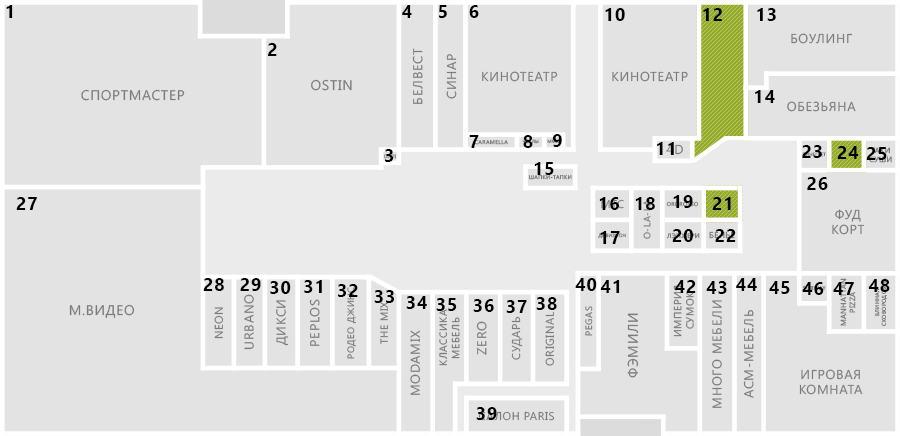
<style>
.page{position:relative;width:900px;height:436px;background:#e3e3e3}
.page>*{position:absolute;margin:0}
.t1{font:18px "SegoeUI-Bold";letter-spacing:0.05em;color:#000000;text-transform:uppercase}
.t2{font:13.1px "SegoeUI";letter-spacing:0.05em;color:#7c7c7c;text-transform:uppercase}
.t3{font:14px "SegoeUI";letter-spacing:0.05em;color:#7c7c7c;text-transform:uppercase}
.t4{font:5.6px "SegoeUI";letter-spacing:0.05em;color:#7c7c7c;text-transform:uppercase}
.t5{font:13.1px "SegoeUI";letter-spacing:0.05em;text-transform:uppercase}
.t6{font:9.4px "SegoeUI";letter-spacing:0.05em;text-transform:uppercase}
.t7{font:6.6px "SegoeUI";letter-spacing:0.05em;color:#7c7c7c;text-transform:uppercase}
.t8{font:8.4px "SegoeUI";letter-spacing:0.05em;text-transform:uppercase}
.t9{font:7.5px "SegoeUI";letter-spacing:0.05em;color:#7c7c7c;text-transform:uppercase}
.t10{font:10.3px "SegoeUI";letter-spacing:0.05em;color:#7c7c7c;text-transform:uppercase}
.t11{font:11.2px "SegoeUI";letter-spacing:0.05em;color:#7c7c7c;text-transform:uppercase}
</style>
<div class="page">
<p class="t1" style="left:6px;top:5px;width:7px;height:13px">1</p>
<p class="t1" style="left:402px;top:5px;width:10px;height:13px">4</p>
<p class="t1" style="left:439px;top:5px;width:8px;height:13px">5</p>
<p class="t1" style="left:469px;top:5px;width:10px;height:13px">6</p>
<p class="t1" style="left:605px;top:8px;width:20px;height:13px">10</p>
<p class="t1" style="left:703px;top:8px;width:19px;height:13px">12</p>
<p class="t1" style="left:757px;top:8px;width:19px;height:13px">13</p>
<p class="t2" style="left:791px;top:33px;width:62px;height:11px">Боулинг</p>
<p class="t1" style="left:268px;top:43px;width:9px;height:13px">2</p>
<p class="t2" style="left:412px;top:48px;width:11px;height:56px;rotate:-90deg">Белвест</p>
<p class="t2" style="left:446px;top:54px;width:11px;height:45px;rotate:-90deg">синар</p>
<p class="t2" style="left:482px;top:71px;width:76px;height:11px">Кинотеатр</p>
<p class="t2" style="left:612px;top:71px;width:76px;height:11px">Кинотеатр</p>
<p class="t3" style="left:81px;top:89px;width:104px;height:12px">Спортмастер</p>
<p class="t3" style="left:311px;top:79px;width:41px;height:12px">Ostin</p>
<p class="t1" style="left:755px;top:90px;width:20px;height:13px">14</p>
<p class="t2" style="left:787px;top:101px;width:69px;height:11px">Обезьяна</p>
<p class="t1" style="left:469px;top:135px;width:10px;height:13px">7</p>
<p class="t1" style="left:523px;top:135px;width:10px;height:13px">8</p>
<p class="t1" style="left:552px;top:134px;width:10px;height:13px">9</p>
<p class="t1" style="left:385px;top:149px;width:8px;height:13px">3</p>
<p class="t4" style="left:474px;top:139px;width:34px;height:6px">Caramella</p>
<p class="t1" style="left:657px;top:142px;width:17px;height:13px">11</p>
<p class="t5" style="left:666px;top:144px;width:17px;height:11px">4d</p>
<p class="t1" style="left:802px;top:145px;width:20px;height:13px">23</p>
<p class="t1" style="left:837px;top:146px;width:22px;height:13px">24</p>
<p class="t1" style="left:866px;top:147px;width:21px;height:13px">25</p>
<p class="t1" style="left:534px;top:162px;width:20px;height:13px">15</p>
<p class="t4" style="left:529px;top:175px;width:43px;height:5px">Шапки-тапки</p>
<p class="t1" style="left:807px;top:177px;width:21px;height:13px">26</p>
<p class="t1" style="left:16px;top:197px;width:21px;height:13px">27</p>
<p class="t1" style="left:599px;top:197px;width:20px;height:13px">16</p>
<p class="t1" style="left:635px;top:197px;width:20px;height:13px">18</p>
<p class="t1" style="left:673px;top:195px;width:20px;height:13px">19</p>
<p class="t1" style="left:712px;top:197px;width:19px;height:13px">21</p>
<p class="t6" style="left:643px;top:200px;width:8px;height:39px;rotate:-90deg">O-la-la</p>
<p class="t2" style="left:832px;top:209px;width:33px;height:26px;text-align:center">Фуд<br>корт</p>
<p class="t1" style="left:600px;top:231px;width:20px;height:13px">17</p>
<p class="t7" style="left:666px;top:233px;width:34px;height:6px">Лэнжери</p>
<p class="t1" style="left:672px;top:229px;width:21px;height:13px">20</p>
<p class="t8" style="left:709px;top:231px;width:26px;height:8px">Белье</p>
<p class="t1" style="left:715px;top:229px;width:21px;height:13px">22</p>
<p class="t1" style="left:203px;top:278px;width:21px;height:13px">28</p>
<p class="t1" style="left:240px;top:278px;width:21px;height:13px">29</p>
<p class="t1" style="left:270px;top:281px;width:21px;height:13px">30</p>
<p class="t1" style="left:304px;top:280px;width:18px;height:13px">31</p>
<p class="t1" style="left:575px;top:278px;width:22px;height:13px">40</p>
<p class="t1" style="left:600px;top:280px;width:20px;height:13px">41</p>
<p class="t1" style="left:675px;top:280px;width:21px;height:13px">42</p>
<p class="t1" style="left:706px;top:281px;width:21px;height:13px">43</p>
<p class="t1" style="left:736px;top:278px;width:21px;height:13px">44</p>
<p class="t1" style="left:769px;top:281px;width:21px;height:13px">45</p>
<p class="t9" style="left:840px;top:278px;width:16px;height:48px;text-align:center;rotate:-90deg">Manhattan<br>pizza</p>
<p class="t1" style="left:868px;top:279px;width:22px;height:13px">48</p>
<p class="t4" style="left:875px;top:278px;width:12px;height:48px;text-align:center;rotate:-90deg">Блинная<br>сковородовна</p>
<p class="t2" style="left:244px;top:294px;width:10px;height:56px;rotate:-90deg">Urbano</p>
<p class="t1" style="left:338px;top:284px;width:20px;height:13px">32</p>
<p class="t6" style="left:347px;top:287px;width:9px;height:72px;rotate:-90deg">Родео джинс</p>
<p class="t1" style="left:374px;top:290px;width:20px;height:13px">33</p>
<p class="t10" style="left:673px;top:285px;width:21px;height:52px;text-align:center;rotate:-90deg">Империя<br>сумок</p>
<p class="t1" style="left:802px;top:282px;width:22px;height:13px">46</p>
<p class="t1" style="left:833px;top:282px;width:21px;height:13px">47</p>
<p class="t3" style="left:69px;top:304px;width:66px;height:14px">М.видео</p>
<p class="t2" style="left:276px;top:300px;width:13px;height:46px;rotate:-90deg">Дикси</p>
<p class="t2" style="left:309px;top:299px;width:11px;height:47px;rotate:-90deg">Peplos</p>
<p class="t10" style="left:380px;top:302px;width:8px;height:42px;rotate:-90deg">The mix</p>
<p class="t1" style="left:406px;top:296px;width:21px;height:13px">34</p>
<p class="t1" style="left:436px;top:298px;width:21px;height:13px">35</p>
<p class="t1" style="left:473px;top:299px;width:21px;height:13px">36</p>
<p class="t1" style="left:506px;top:300px;width:21px;height:13px">37</p>
<p class="t1" style="left:536px;top:297px;width:21px;height:13px">38</p>
<p class="t2" style="left:712px;top:300px;width:10px;height:108px;rotate:-90deg">Много мебели</p>
<p class="t11" style="left:214px;top:307px;width:10px;height:32px;rotate:-90deg">Neon</p>
<p class="t10" style="left:439px;top:309px;width:21px;height:57px;text-align:center;rotate:-90deg">Классика<br>Мебель</p>
<p class="t11" style="left:511px;top:316px;width:12px;height:44px;rotate:-90deg">Сударь</p>
<p class="t11" style="left:545px;top:311px;width:10px;height:55px;rotate:-90deg">Original</p>
<p class="t6" style="left:585px;top:306px;width:8px;height:30px;rotate:-90deg">Pegas</p>
<p class="t3" style="left:627px;top:313px;width:12px;height:65px;rotate:-90deg">Фэмили</p>
<p class="t2" style="left:743px;top:310px;width:11px;height:88px;rotate:-90deg">аСМ-мебель</p>
<p class="t2" style="left:476px;top:321px;width:11px;height:34px;rotate:-90deg">Zero</p>
<p class="t2" style="left:410px;top:330px;width:11px;height:65px;rotate:-90deg">Modamix</p>
<p class="t2" style="left:799px;top:369px;width:64px;height:26px;text-align:center">Игровая<br>комната</p>
<p class="t1" style="left:476px;top:407px;width:21px;height:13px">39</p>
<p class="t11" style="left:478px;top:411px;width:77px;height:10px">Салон Paris</p>
</div>
